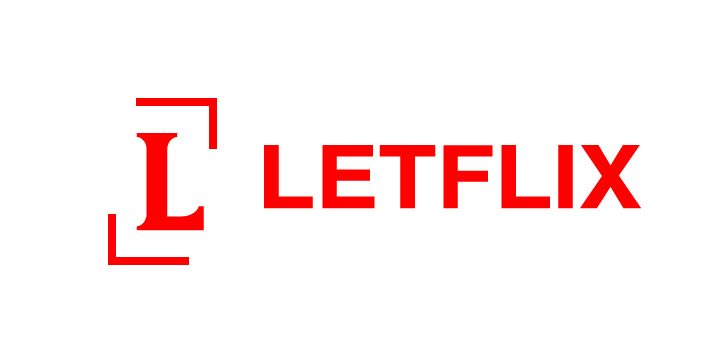
<style>
.page{position:relative;width:720px;height:360px;background:#ffffff}
.page>*{position:absolute;margin:0}
.t1{font:132px "GreatAston";color:#ff0000;scale:1.09 1}
.t2{font:87.3px "Helvetica-Bold";color:#ff0000;scale:1.09 1}
</style>
<div class="page">
<p class="t1" style="left:136px;top:133px;width:68px;height:98px">L</p>
<p class="t2" style="left:264px;top:145px;width:377px;height:64px">LETFLIX</p>
</div>
